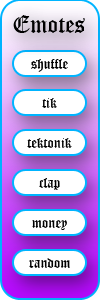
<style>
.page{position:relative;width:100px;height:300px;background:#ffffff}
.page>*{position:absolute;margin:0}
.t1{font:24px "OldEnglishTextMT";color:#000000}
.t2{font:14px "OldEnglishTextMT";color:#000000}
</style>
<div class="page">
<p class="t1" style="left:13px;top:15px;width:72px;height:18px">Emotes</p>
<p class="t2" style="left:31px;top:59px;width:37px;height:13px">shuffle</p>
<p class="t2" style="left:42px;top:98px;width:15px;height:10px">tik</p>
<p class="t2" style="left:27px;top:138px;width:45px;height:10px">tektonik</p>
<p class="t2" style="left:39px;top:178px;width:21px;height:12px">clap</p>
<p class="t2" style="left:32px;top:220px;width:35px;height:10px">money</p>
<p class="t2" style="left:29px;top:258px;width:41px;height:10px">random</p>
</div>
